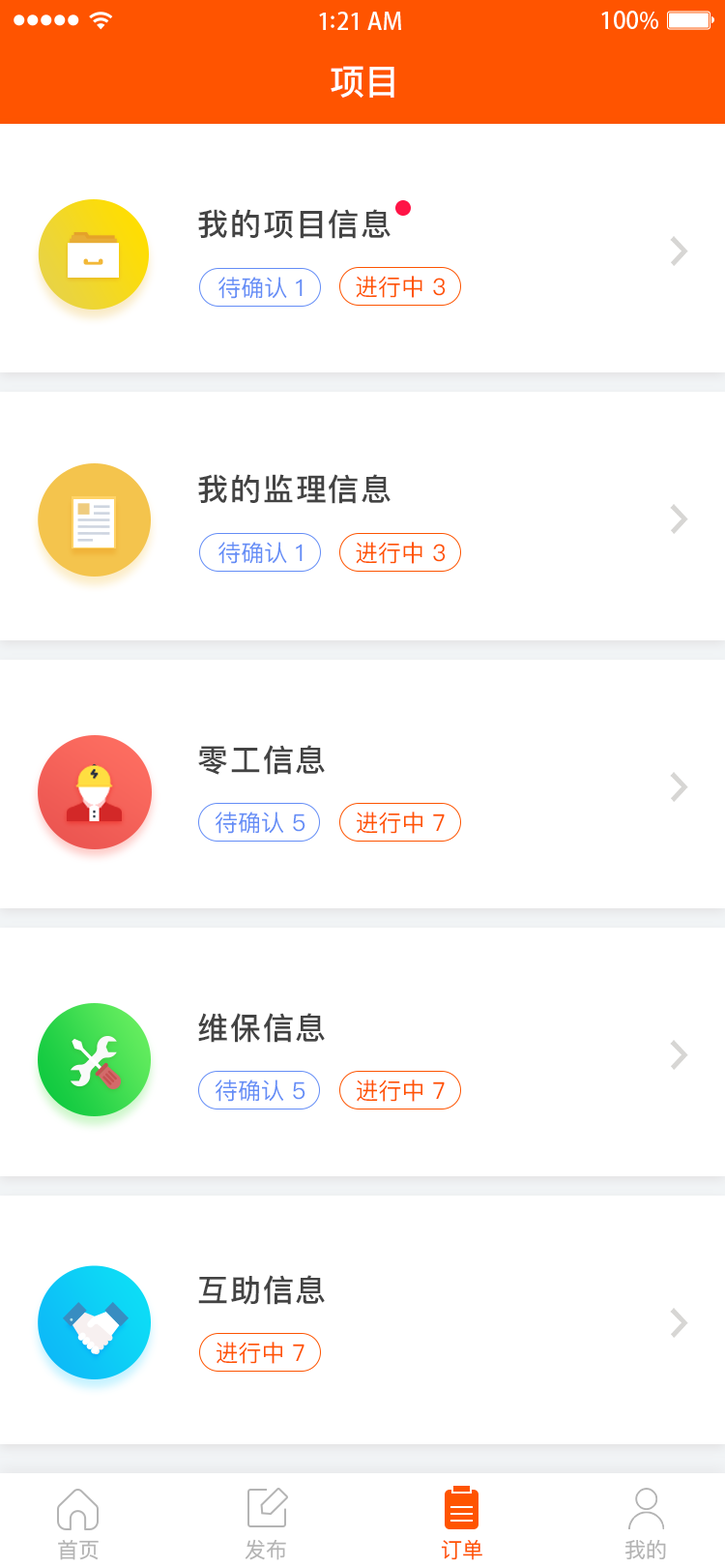
<style>
.page{position:relative;width:725px;height:1568px;background:#ffffff}
.page>*{position:absolute;margin:0}
.t1{font:34.8px "PingFangSC-Medium";color:#ffffff}
.t2{font:31px "PingFangSC-Medium";letter-spacing:0.06em;color:#434343}
.t3{font:23.2px "PingFangSC-Regular";color:#648df6}
.t4{font:23.2px "PingFangSC-Regular";color:#ff5400}
.t5{font:21.3px "PingFangSC-Regular";color:#b4b4b4}
.t6{font:21.3px "PingFangSC-Regular";color:#ff5400}
</style>
<div class="page">
<p class="t1" style="left:331px;top:66px;width:64px;height:32px">项目</p>
<p class="t2" style="left:198px;top:209px;width:193px;height:30px">我的项目信息</p>
<p class="t3" style="left:219px;top:277px;width:84px;height:22px">待确认 1</p>
<p class="t4" style="left:356px;top:276px;width:90px;height:22px">进行中 3</p>
<p class="t2" style="left:198px;top:474px;width:193px;height:30px">我的监理信息</p>
<p class="t3" style="left:219px;top:542px;width:84px;height:22px">待确认 1</p>
<p class="t4" style="left:356px;top:542px;width:90px;height:22px">进行中 3</p>
<p class="t2" style="left:198px;top:745px;width:127px;height:30px">零工信息</p>
<p class="t3" style="left:216px;top:812px;width:90px;height:22px">待确认 5</p>
<p class="t4" style="left:357px;top:812px;width:88px;height:22px">进行中 7</p>
<p class="t2" style="left:198px;top:1013px;width:127px;height:30px">维保信息</p>
<p class="t3" style="left:216px;top:1080px;width:90px;height:22px">待确认 5</p>
<p class="t4" style="left:357px;top:1080px;width:88px;height:22px">进行中 7</p>
<p class="t2" style="left:198px;top:1275px;width:127px;height:30px">互助信息</p>
<p class="t4" style="left:217px;top:1342px;width:88px;height:22px">进行中 7</p>
<p class="t5" style="left:58px;top:1539px;width:41px;height:21px">首页</p>
<p class="t5" style="left:245px;top:1539px;width:41px;height:21px">发布</p>
<p class="t6" style="left:441px;top:1539px;width:42px;height:21px">订单</p>
<p class="t5" style="left:626px;top:1539px;width:40px;height:20px">我的</p>
</div>
